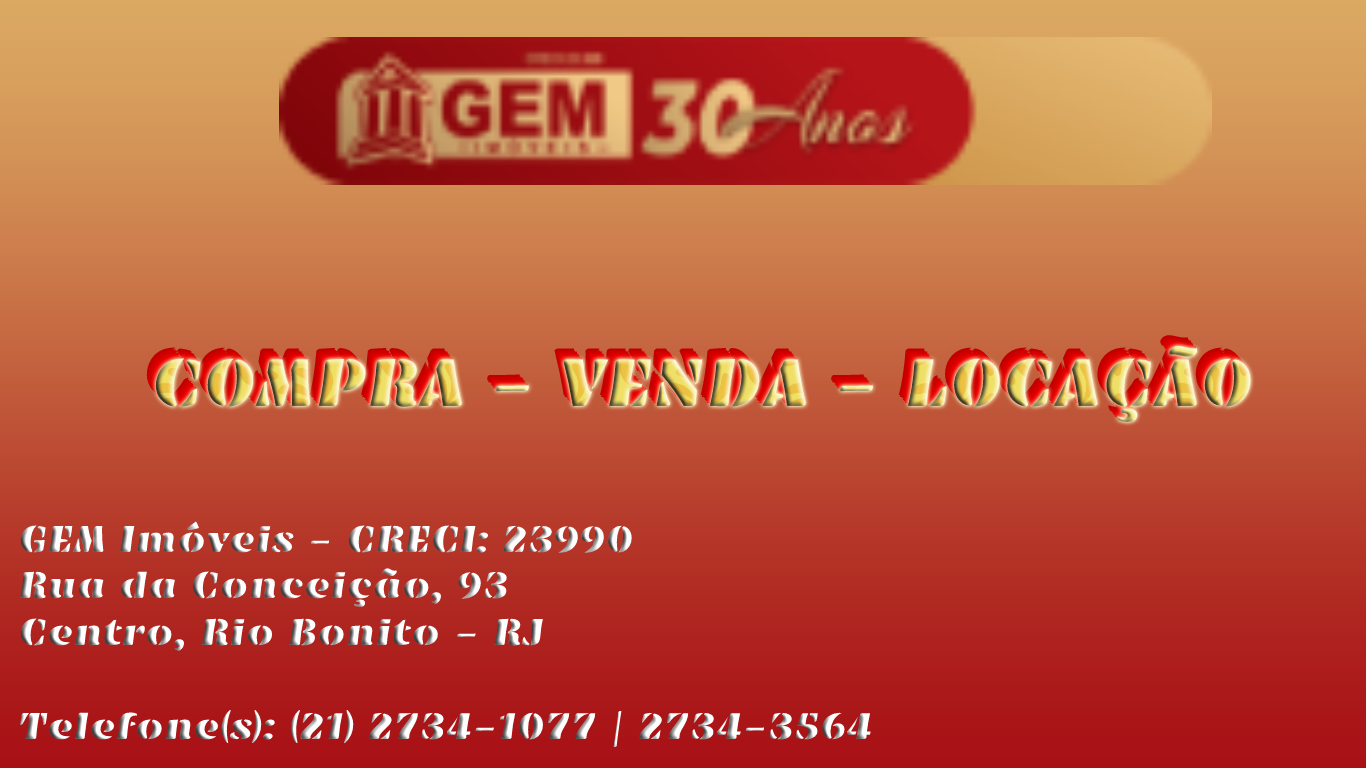
<style>
.page{position:relative;width:1366px;height:768px}
.page>*{position:absolute;margin:0}
.t1{font:70px "EmblemaOne-Regular"}
.t2{font:39px "EmblemaOne-Regular"}
</style>
<div class="page">
<p class="t1" style="left:155px;top:346px;width:1096px;height:76px">COMPRA - VENDA - LOCAÇÃO</p>
<p class="t2" style="left:19px;top:521px;width:852px;height:226px">GEM Imóveis - CRECI: 23990<br>Rua da Conceição, 93  <br>Centro, Rio Bonito - RJ<br><br>Telefone(s): (21) 2734-1077 | 2734-3564</p>
</div>
